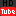
<style>
.page{position:relative;width:16px;height:16px;background:#ff1d1e}
.page>*{position:absolute;margin:0}
.t1{font:8px "ArialNarrow";letter-spacing:0.2em;color:#000000}
.t2{font:6.5px "ArialNarrow";letter-spacing:0.14em;color:#ffffff}
.t3{font:6.5px "ArialNarrow";letter-spacing:0.15em;color:#ffffff}
.t4{font:6.5px "Consolas";letter-spacing:0.15em;color:#ffffff}
</style>
<div class="page">
<p class="t1" style="left:3px;top:0px;width:10px;height:6px">HD</p>
<p class="t2" style="left:1px;top:9px;width:3px;height:5px">T</p>
<p class="t3" style="left:4px;top:9px;width:11px;height:5px">ub<span class="t4">e</span></p>
</div>
